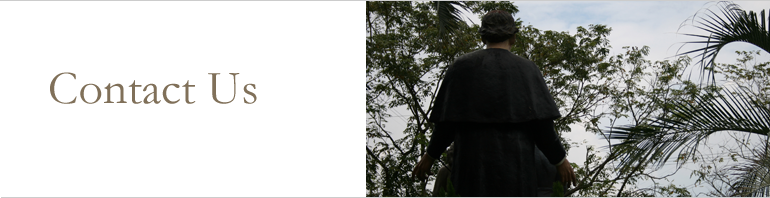
<style>
.page{position:relative;width:770px;height:198px;background:#ffffff}
.page>*{position:absolute;margin:0}
.t1{font:48px "Garamond";color:#807059}
</style>
<div class="page">
<p class="t1" style="left:50px;top:72px;width:207px;height:32px">Contact Us</p>
</div>
